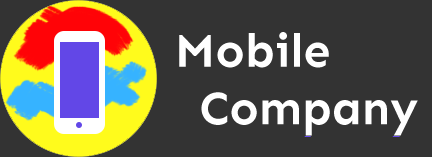
<style>
.page{position:relative;width:432px;height:157px;background:#333333}
.page>*{position:absolute;margin:0}
.t1{font:48px "Sen-Bold";color:#ffffff}
</style>
<div class="page">
<p class="t1" style="left:179px;top:32px;width:239px;height:104px;text-align:center">Mobile <br>        Company</p>
</div>
